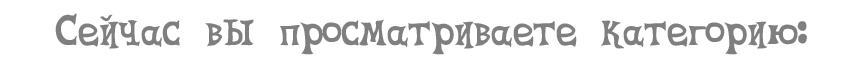
<style>
.page{position:relative;width:848px;height:71px;background:#ffffff}
.page>*{position:absolute;margin:0}
.t1{font:48px "CelestiaReduxMedium";color:#7f7f7f}
</style>
<div class="page">
<p class="t1" style="left:55px;top:13px;width:752px;height:42px">Сейчас вы просматриваете категорию:</p>
</div>
